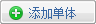
<style>
.page{position:relative;width:96px;height:24px;background:#f4f4f4}
.page>*{position:absolute;margin:0}
.t1{font:12px "SimSun";color:#3967a3}
</style>
<div class="page">
<p class="t1" style="left:29px;top:7px;width:47px;height:12px">添加单体</p>
</div>
